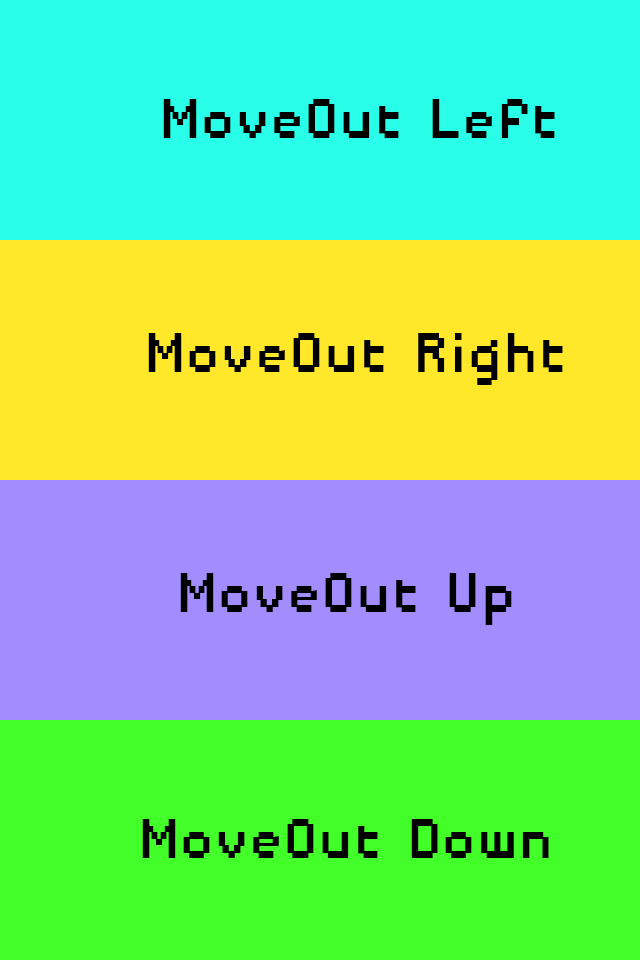
<style>
.page{position:relative;width:640px;height:960px;background:#29fee8}
.page>*{position:absolute;margin:0}
.t1{font:72.6px "DisposableDroidBB";color:#000000}
.t2{font:72.6px "DisposableDroidBB";color:#010101}
</style>
<div class="page">
<p class="t1" style="left:163px;top:99px;width:392px;height:39px">MoveOut Left</p>
<p class="t2" style="left:148px;top:333px;width:415px;height:52px">MoveOut Right</p>
<p class="t2" style="left:180px;top:573px;width:332px;height:52px">MoveOut Up</p>
<p class="t2" style="left:142px;top:819px;width:407px;height:39px">MoveOut Down</p>
</div>
